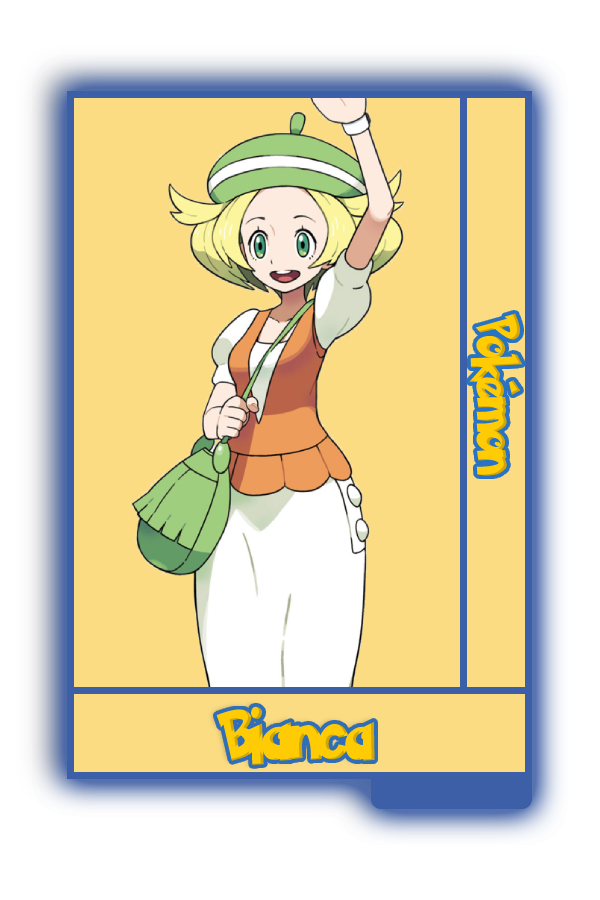
<style>
.page{position:relative;width:600px;height:900px;background:#fbdc83}
.page>*{position:absolute;margin:0}
.t1{font:48.8px "PokemonSolidNormal";color:#ffcb05;scale:0.8 1}
.t2{font:56.6px "PokemonSolidNormal";color:#ffcb05;scale:0.92 1}
</style>
<div class="page">
<p class="t1" style="left:469px;top:313px;width:54px;height:163px;rotate:90deg">Pokémon</p>
<p class="t2" style="left:216px;top:706px;width:159px;height:59px">Bianca</p>
</div>
